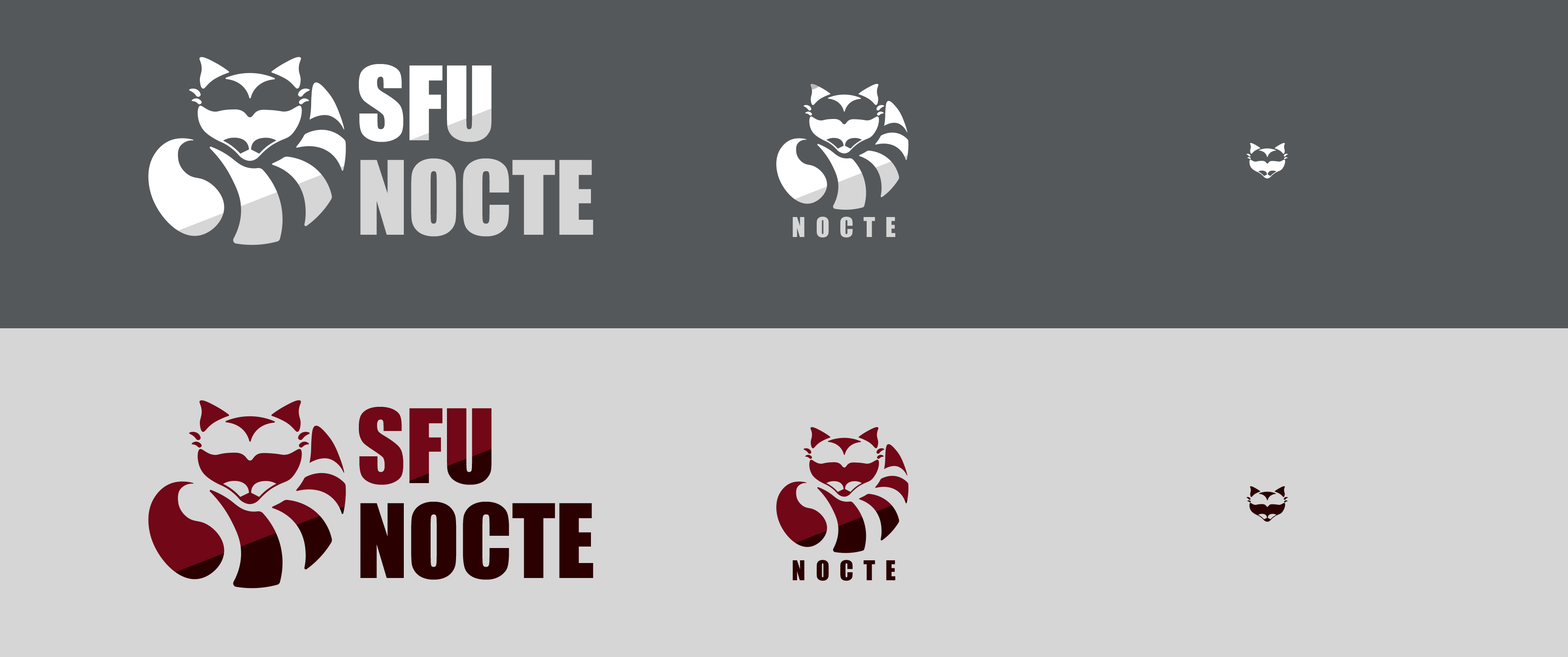
<style>
.page{position:relative;width:1568px;height:657px;background:#d6d6d6}
.page>*{position:absolute;margin:0}
.t1{font:94.6px/94.6px "Impact"}
.t2{font:25.2px "Impact";letter-spacing:0.4em;color:#d6d6d6}
.t3{font:25.2px "Impact";letter-spacing:0.4em;color:#2a0000}
</style>
<div class="page">
<p class="t1" style="left:358px;top:64px;width:235px;height:173px">SFU <br>NOCTE</p>
<p class="t2" style="left:793px;top:217px;width:102px;height:21px">NOCTE</p>
<p class="t1" style="left:358px;top:407px;width:235px;height:173px">SFU <br>NOCTE</p>
<p class="t3" style="left:793px;top:560px;width:102px;height:21px">NOCTE</p>
</div>
